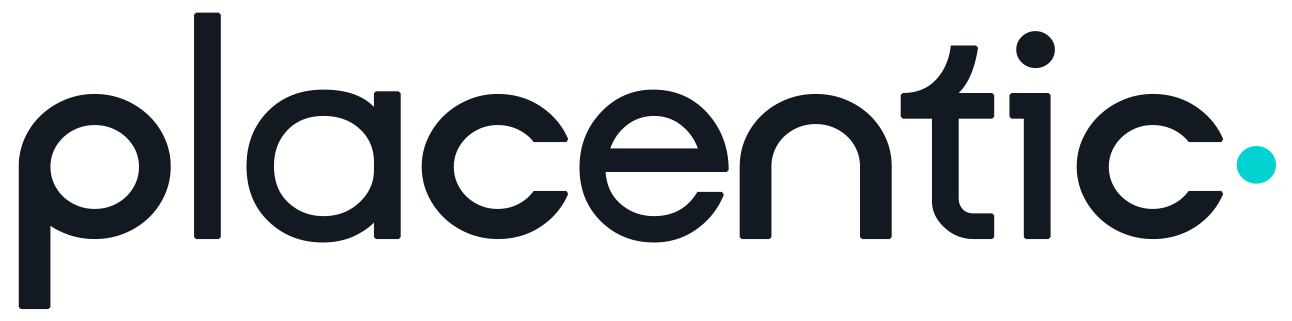
<style>
.page{position:relative;width:1292px;height:321px;background:#ffffff}
.page>*{position:absolute;margin:0}
.t1{font:341.9px "Kobe1.1-Regular";letter-spacing:-0.05em;color:#131920;font-weight:bold;scale:1.05 1}
.t2{font:341.9px "howbai-Regular";letter-spacing:-0.05em;color:#131920;font-weight:bold;scale:1.05 1}
.t3{font:341.9px "Signatrue";letter-spacing:-0.05em;color:#02d2d0;font-weight:bold;scale:1.05 1}
</style>
<div class="page">
<p class="t1" style="left:18px;top:12px;width:1258px;height:298px"><span class="t2">p</span>la<span class="t2">c</span>e<span class="t2">n</span>ti<span class="t2">c</span><span class="t3">.</span></p>
</div>
